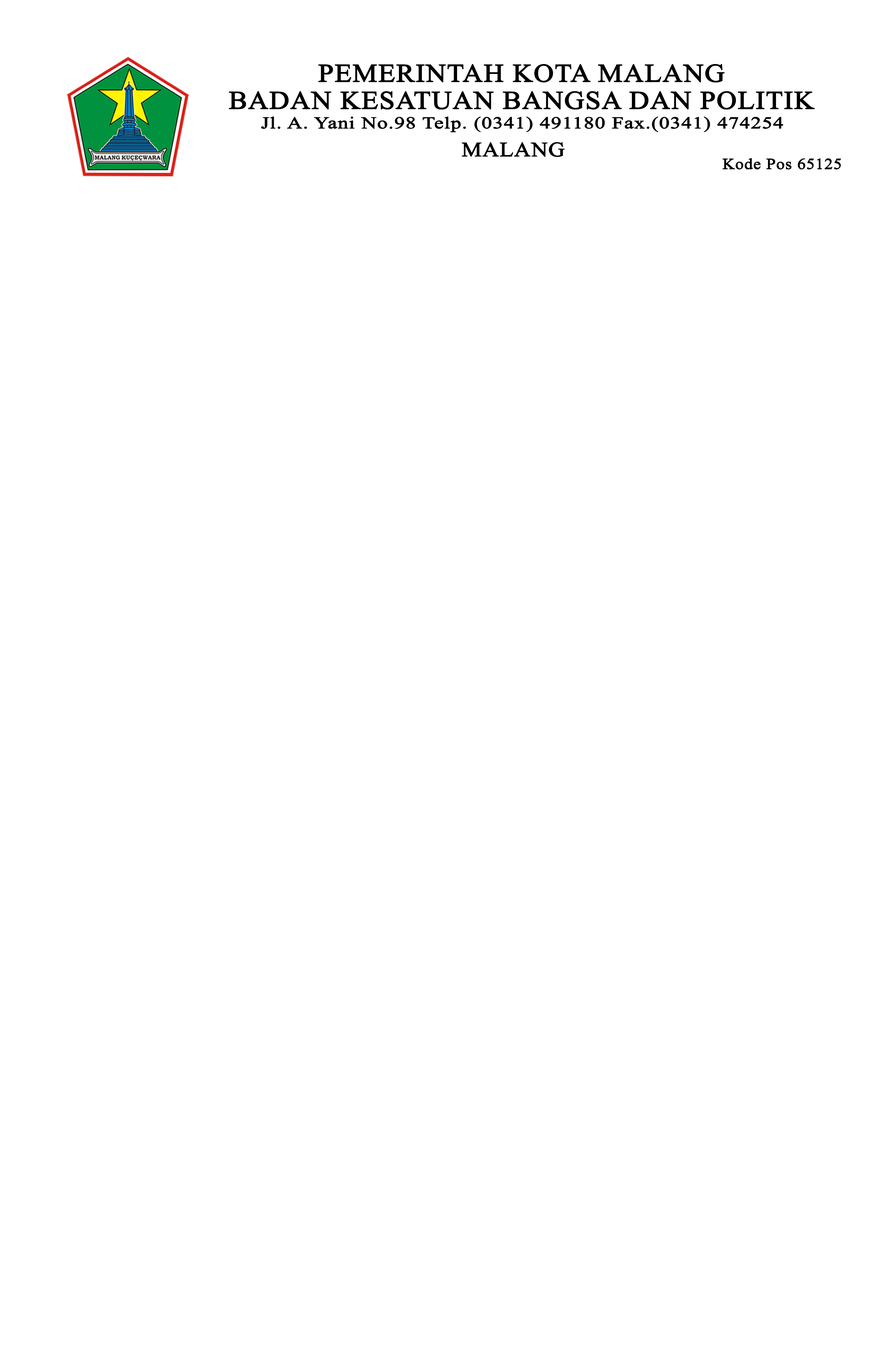
<style>
.page{position:relative;width:883px;height:1350px;background:#ffffff}
.page>*{position:absolute;margin:0}
.t1{font:25.5px/13.6px "TimesNewRomanPSMT";letter-spacing:0.01em;color:#000000;font-weight:bold;scale:1.09 1}
.t2{font:16.6px "TimesNewRomanPSMT";letter-spacing:0.01em;color:#000000;font-weight:bold;scale:1.25 1}
.t3{font:20.4px "TimesNewRomanPSMT";letter-spacing:0.01em;color:#000000;font-weight:bold;scale:1.1 1}
.t4{font:15.2px "TimesNewRomanPSMT";letter-spacing:0.01em;color:#000000;font-weight:bold;scale:1.1 1}
</style>
<div class="page">
<p class="t1" style="left:229px;top:64px;width:586px;height:46px;text-align:center">PEMERINTAH KOTA MALANG<br><br>BADAN KESATUAN BANGSA DAN POLITIK</p>
<p class="t2" style="left:261px;top:116px;width:522px;height:16px">Jl. A. Yani No.98 Telp. (0341) 491180 Fax.(0341) 474254</p>
<p class="t3" style="left:462px;top:142px;width:103px;height:15px">MALANG</p>
<p class="t4" style="left:722px;top:158px;width:119px;height:12px">Kode Pos 65125</p>
</div>
